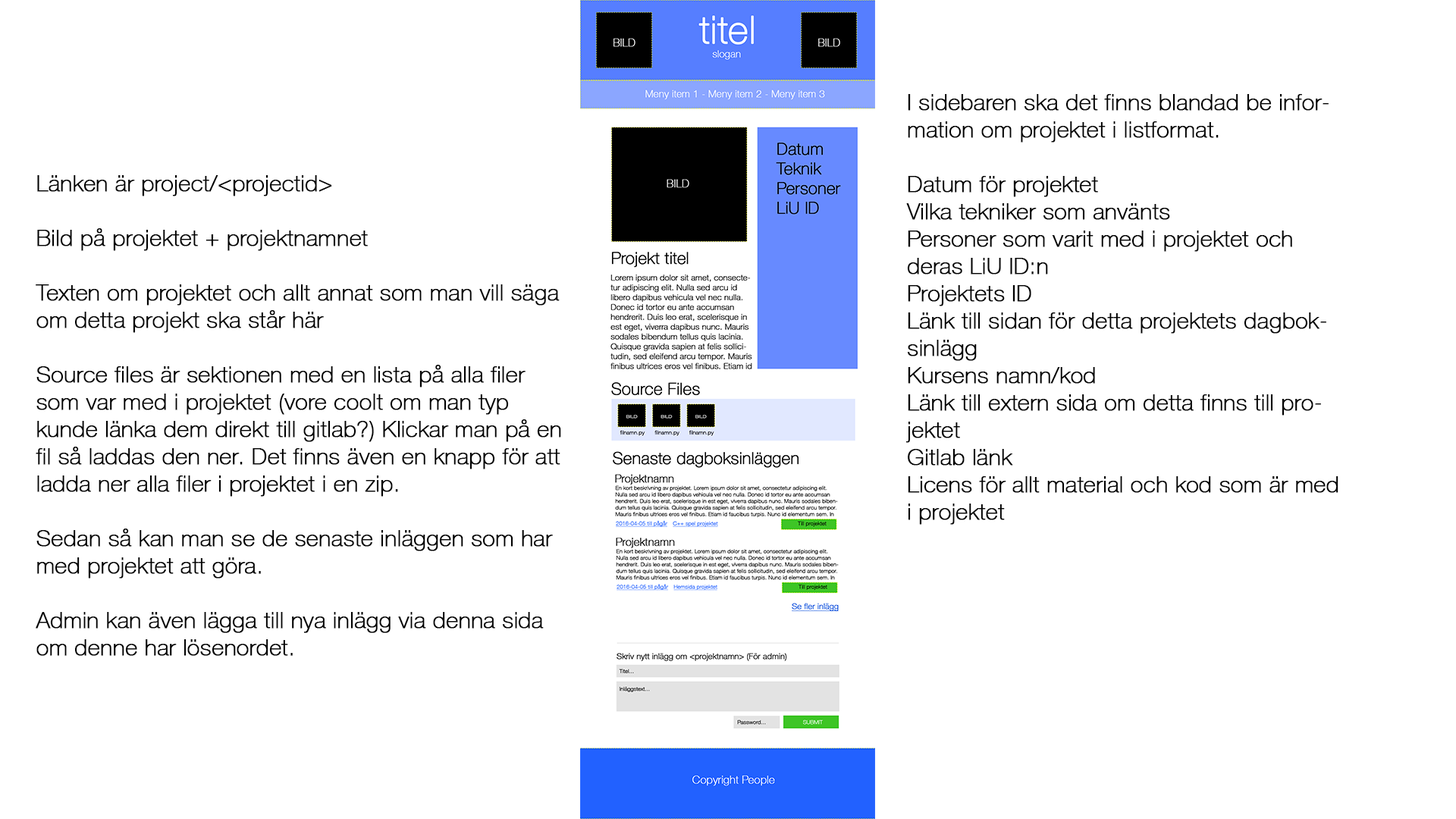
<style>
.page{position:relative;width:1456px;height:819px;background:#ffffff}
.page>*{position:absolute;margin:0}
.t1{font:22.7px "HelveticaNeue-Thin";color:#000000;font-weight:bold}
</style>
<div class="page">
<p class="t1" style="left:905px;top:94px;width:433px;height:431px">I sidebaren ska det finns blandad be information om projektet i listformat.<br><br>Datum för projektet<br>Vilka tekniker som använts<br>Personer som varit med i projektet och deras LiU ID:n<br>Projektets ID<br>Länk till sidan för detta projektets dagboksinlägg<br>Kursens namn/kod<br>Länk till extern sida om detta finns till projektet<br>Gitlab länk<br>Licens för allt material och kod som är med i projektet</p>
<p class="t1" style="left:36px;top:175px;width:525px;height:481px">Länken är project/&lt;projectid&gt;<br><br>Bild på projektet + projektnamnet<br><br>Texten om projektet och allt annat som man vill säga om detta projekt ska står här<br><br>Source files är sektionen med en lista på alla filer som var med i projektet (vore coolt om man typ kunde länka dem direkt till gitlab?) Klickar man på en fil så laddas den ner. Det finns även en knapp för att ladda ner alla filer i projektet i en zip.<br><br>Sedan så kan man se de senaste inläggen som har med projektet att göra.<br><br>Admin kan även lägga till nya inlägg via denna sida om denne har lösenordet.</p>
</div>
